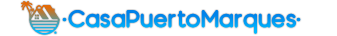
<style>
.page{position:relative;width:337px;height:36px;background:#ffffff}
.page>*{position:absolute;margin:0}
.t1{font:25px "Moon2.0-Bold";letter-spacing:0.02em;color:#0096f1}
.t2{font:25px "Moon2.0-Bold";letter-spacing:0.02em;color:#0096f1;font-weight:bold}
</style>
<div class="page">
<p class="t1" style="left:62px;top:10px;width:239px;height:24px"><span class="t2">.</span>CasaPuertoMarques<span class="t2">.</span></p>
</div>
